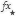
<style>
.page{position:relative;width:16px;height:16px;background:#ffffff}
.page>*{position:absolute;margin:0}
.t1{font:11.6px "BodoniMT-Italic";letter-spacing:0.025em;scale:0.96 1}
.t2{font:11.6px "BodoniMT-Italic";letter-spacing:0.025em;color:#424242;scale:0.96 1}
</style>
<div class="page">
<p class="t1" style="left:0px;top:1px;width:8px;height:11px">f</p>
<p class="t2" style="left:5px;top:4px;width:6px;height:5px">x</p>
</div>
